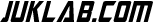
<style>
.page{position:relative;width:153px;height:22px;background:#000000}
.page>*{position:absolute;margin:0}
.t1{font:30px "MegatronCondensed-Italic";color:#000000}
</style>
<div class="page">
<p class="t1" style="left:0px;top:1px;width:153px;height:21px">juklab.com</p>
</div>
